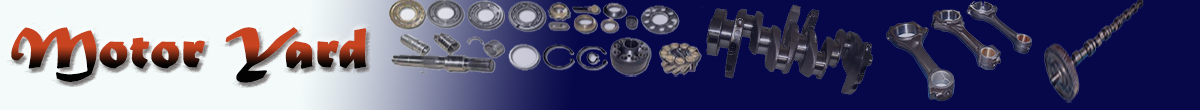
<style>
.page{position:relative;width:1200px;height:110px;background:#060849}
.page>*{position:absolute;margin:0}
.t1{font:58.3px "MaturaMTScriptCapitals";font-weight:bold}
</style>
<div class="page">
<p class="t1" style="left:11px;top:27px;width:356px;height:56px">Motor Yard</p>
</div>
